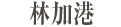
<style>
.page{position:relative;width:121px;height:27px;background:#ffffff}
.page>*{position:absolute;margin:0}
.t1{font:26px "RyuminPro-ExBold";color:#4c4843;scale:0.85 1}
</style>
<div class="page">
<p class="t1" style="left:29px;top:1px;width:65px;height:24px">林加港</p>
</div>
